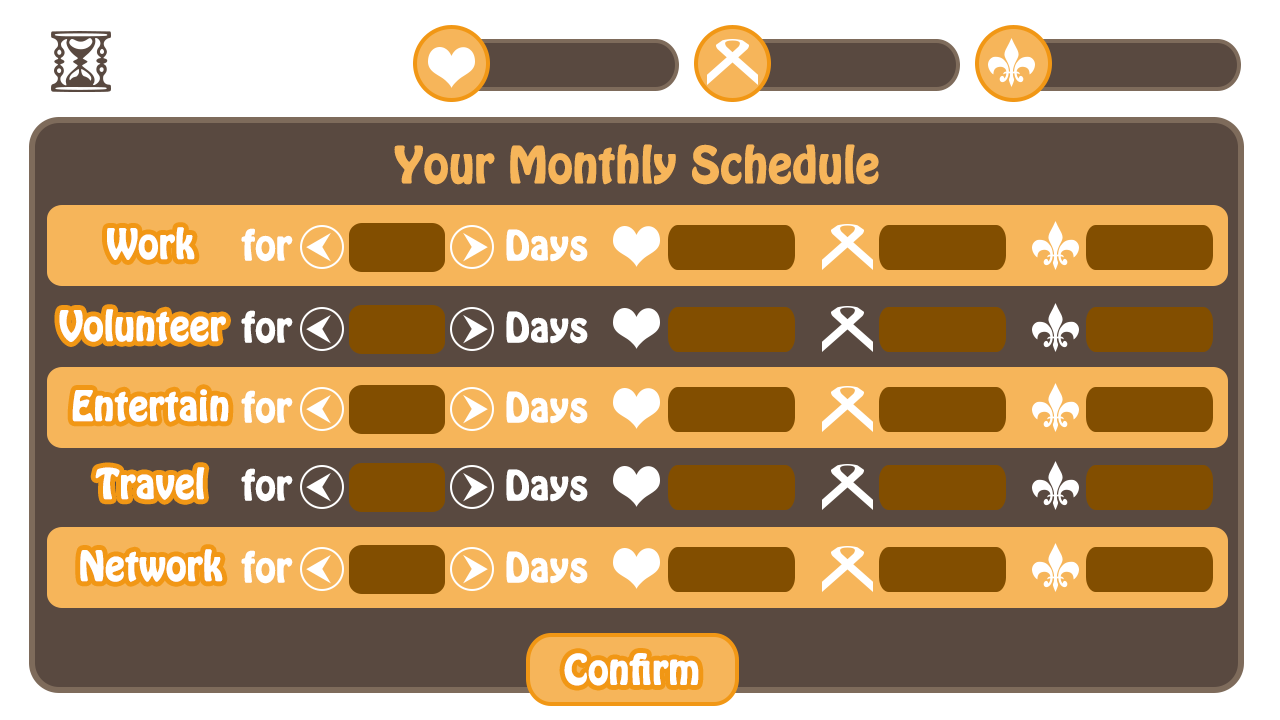
<style>
.page{position:relative;width:1280px;height:720px;background:#594940}
.page>*{position:absolute;margin:0}
.t1{font:44px "HoboStd";color:#f6b55a;font-weight:bold}
.t2{font:36px "HoboStd";color:#ffffff;font-weight:bold}
</style>
<div class="page">
<p class="t1" style="left:394px;top:144px;width:485px;height:41px">Your Monthly Schedule</p>
<p class="t2" style="left:107px;top:227px;width:88px;height:33px">Work</p>
<p class="t2" style="left:241px;top:228px;width:347px;height:34px">for        Days</p>
<p class="t2" style="left:59px;top:309px;width:167px;height:33px">Volunteer</p>
<p class="t2" style="left:241px;top:310px;width:347px;height:34px">for        Days</p>
<p class="t2" style="left:72px;top:389px;width:157px;height:33px">Entertain</p>
<p class="t2" style="left:241px;top:390px;width:347px;height:34px">for        Days</p>
<p class="t2" style="left:95px;top:467px;width:110px;height:33px">Travel</p>
<p class="t2" style="left:241px;top:468px;width:347px;height:34px">for        Days</p>
<p class="t2" style="left:80px;top:549px;width:143px;height:33px">Network</p>
<p class="t2" style="left:241px;top:550px;width:347px;height:34px">for        Days</p>
<p class="t2" style="left:564px;top:653px;width:135px;height:33px">Confirm</p>
</div>
